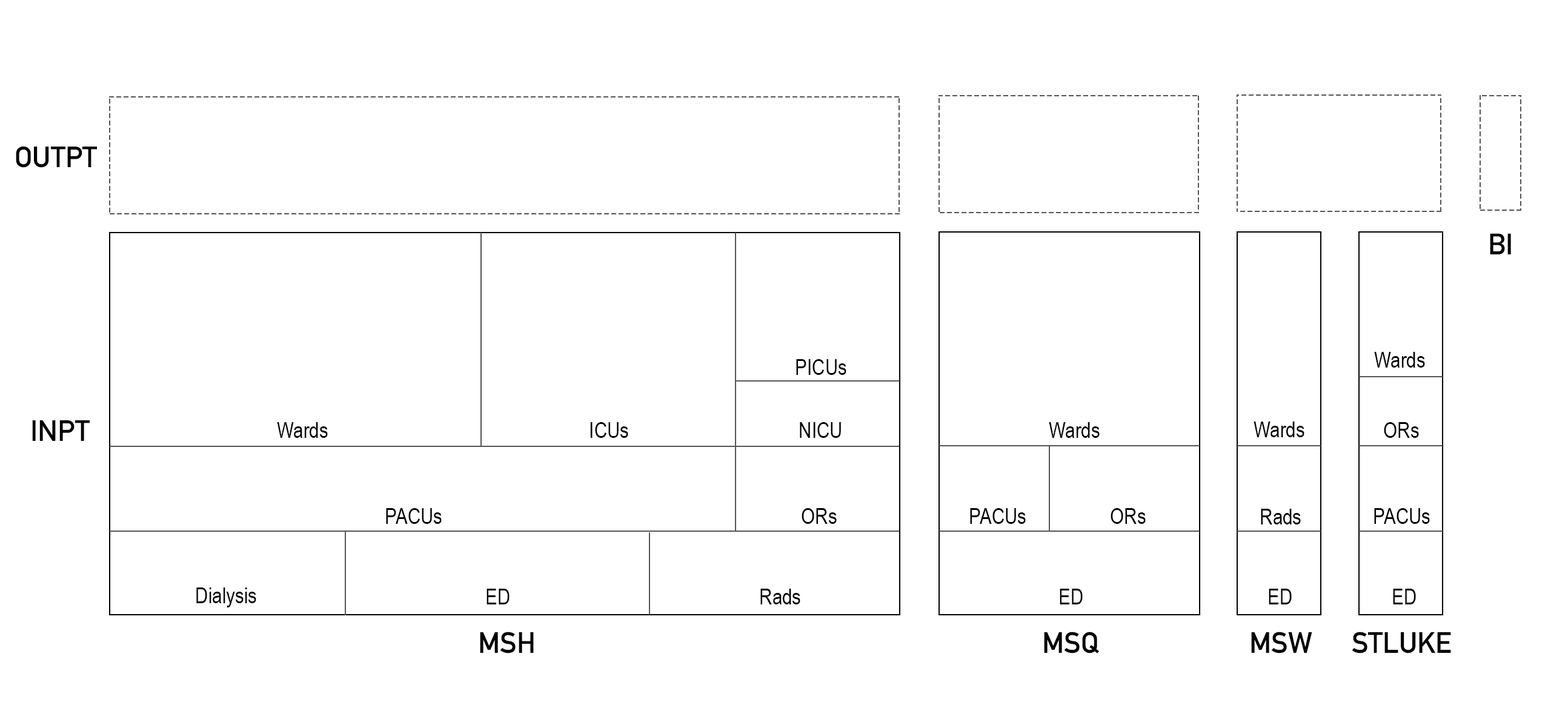
<style>
.page{position:relative;width:1568px;height:711px;background:#ffffff}
.page>*{position:absolute;margin:0}
.t1{font:28.9px "DINAlternate-Bold";color:#000000}
.t2{font:29.1px "DINAlternate-Bold";color:#000000}
.t3{font:21.8px "ArialNarrow";color:#000000}
</style>
<div class="page">
<p class="t1" style="left:16px;top:146px;width:81px;height:22px">OUTPT</p>
<p class="t2" style="left:1490px;top:233px;width:21px;height:21px">BI</p>
<p class="t3" style="left:1374px;top:352px;width:51px;height:16px">Wards</p>
<p class="t3" style="left:796px;top:359px;width:50px;height:16px">PICUs</p>
<p class="t1" style="left:32px;top:420px;width:58px;height:21px">INPT</p>
<p class="t3" style="left:277px;top:422px;width:51px;height:16px">Wards</p>
<p class="t3" style="left:590px;top:422px;width:38px;height:16px">ICUs</p>
<p class="t3" style="left:800px;top:422px;width:41px;height:16px">NICU</p>
<p class="t3" style="left:1049px;top:422px;width:51px;height:16px">Wards</p>
<p class="t3" style="left:1254px;top:422px;width:50px;height:15px">Wards</p>
<p class="t3" style="left:1384px;top:422px;width:35px;height:16px">ORs</p>
<p class="t3" style="left:386px;top:508px;width:56px;height:16px">PACUs</p>
<p class="t3" style="left:802px;top:508px;width:35px;height:16px">ORs</p>
<p class="t3" style="left:970px;top:508px;width:56px;height:16px">PACUs</p>
<p class="t3" style="left:1111px;top:508px;width:35px;height:16px">ORs</p>
<p class="t3" style="left:1261px;top:509px;width:40px;height:16px">Rads</p>
<p class="t3" style="left:1374px;top:508px;width:56px;height:16px">PACUs</p>
<p class="t3" style="left:196px;top:588px;width:60px;height:20px">Dialysis</p>
<p class="t3" style="left:487px;top:589px;width:23px;height:16px">ED</p>
<p class="t3" style="left:760px;top:589px;width:40px;height:16px">Rads</p>
<p class="t3" style="left:1060px;top:589px;width:23px;height:16px">ED</p>
<p class="t3" style="left:1269px;top:589px;width:23px;height:16px">ED</p>
<p class="t3" style="left:1393px;top:589px;width:23px;height:16px">ED</p>
<p class="t2" style="left:480px;top:632px;width:54px;height:22px">MSH</p>
<p class="t2" style="left:1044px;top:632px;width:55px;height:22px">MSQ</p>
<p class="t2" style="left:1251px;top:632px;width:61px;height:22px">MSW</p>
<p class="t2" style="left:1352px;top:632px;width:99px;height:22px">STLUKE</p>
</div>
